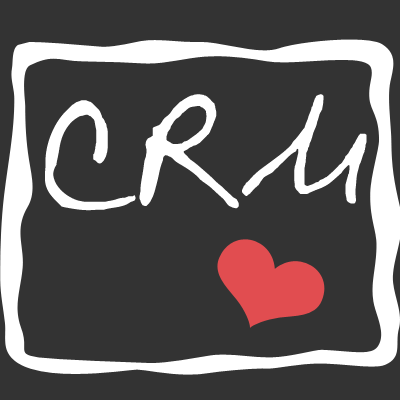
<style>
.page{position:relative;width:400px;height:400px;background:#333333}
.page>*{position:absolute;margin:0}
.t1{font:130px "-";color:#ffffff}
.t2{font:72px "-";color:#ffffff}
</style>
<div class="page">
<p class="t1" style="left:45px;top:94px;width:322px;height:117px"><span class="t2"><br><br><br></span>CRM</p>
</div>
